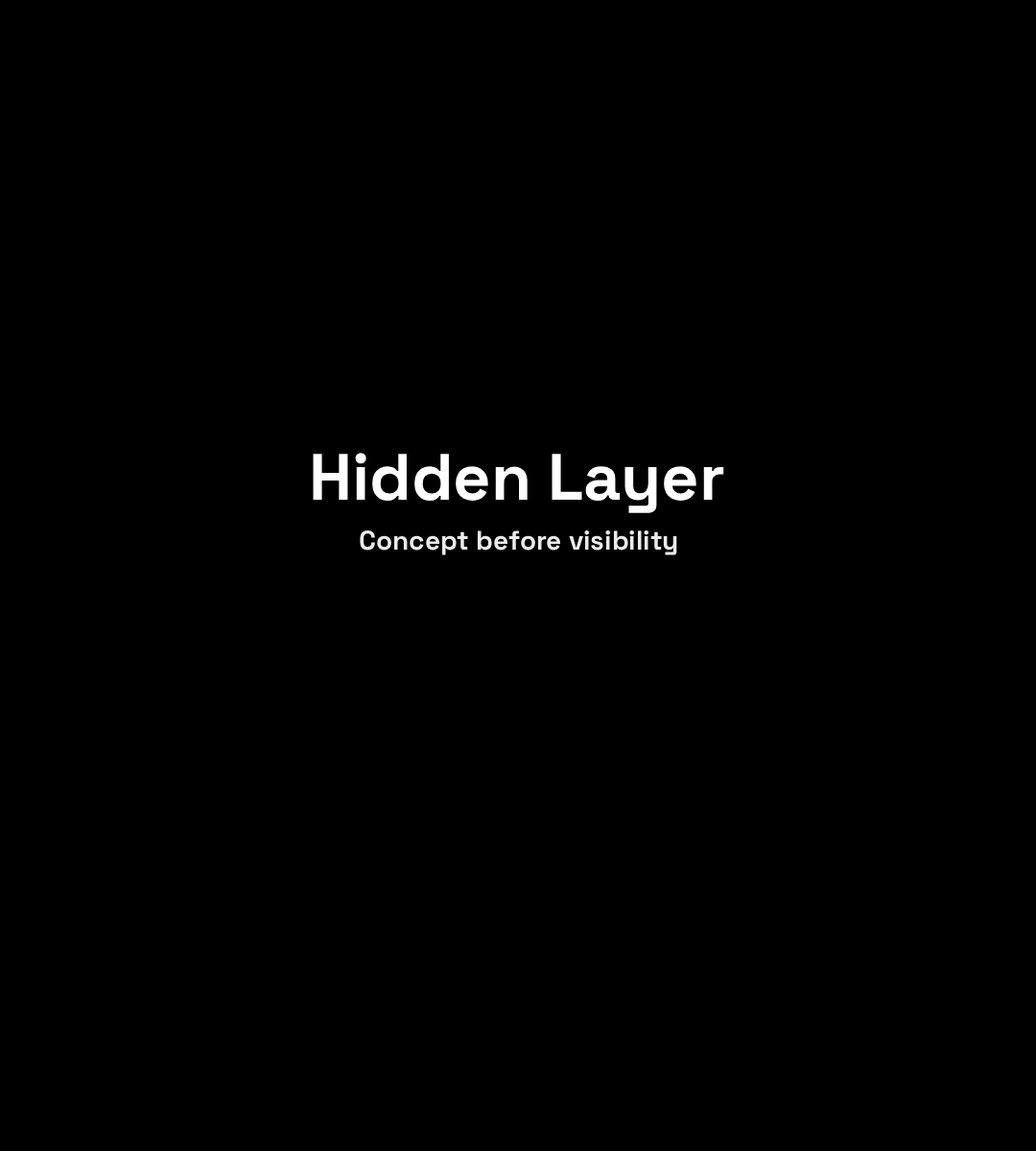
<style>
.page{position:relative;width:1036px;height:1151px;background:#000000}
.page>*{position:absolute;margin:0}
.t1{font:65.6px "SpaceGroteskLight-Bold";color:#ffffff}
.t2{font:26.9px "SpaceGroteskLight-Bold";color:#ebebeb}
</style>
<div class="page">
<p class="t1" style="left:313px;top:453px;width:411px;height:60px">Hidden Layer</p>
<p class="t2" style="left:360px;top:530px;width:317px;height:25px">Concept before visibility</p>
</div>
